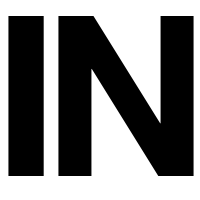
<style>
.page{position:relative;width:200px;height:200px;background:#ffffff}
.page>*{position:absolute;margin:0}
.t1{font:224.3px "HelveticaNeue-Bold";letter-spacing:-0.07em;color:#000000}
</style>
<div class="page">
<p class="t1" style="left:8px;top:16px;width:186px;height:160px">IN</p>
</div>
